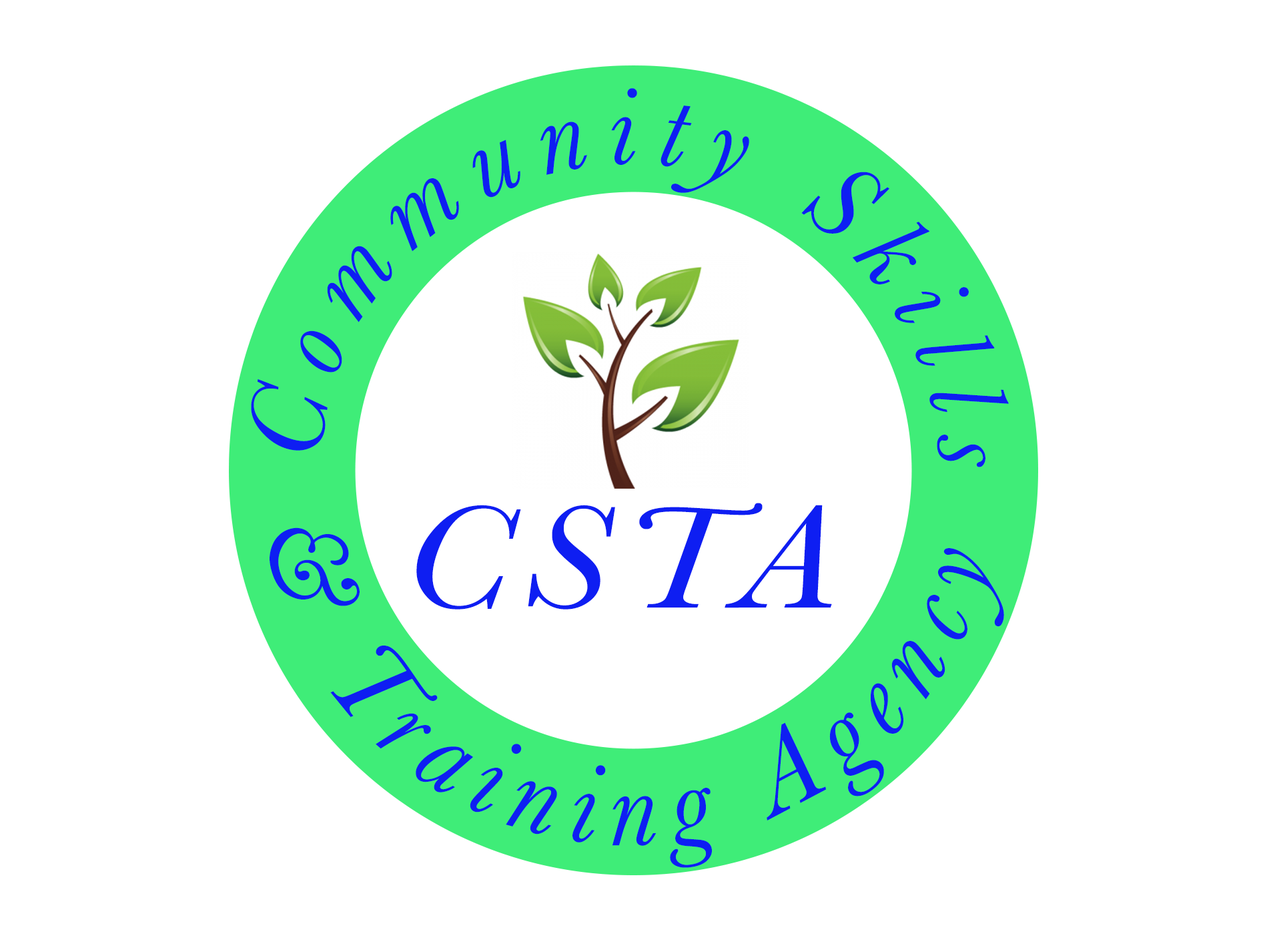
<style>
.page{position:relative;width:1261px;height:946px;background:#ffffff}
.page>*{position:absolute;margin:0}
.t1{font:111.2px "Baskerville-Italic";letter-spacing:0.18em;color:#0e1ef2}
.t2{font:151.5px "Baskerville-Italic";letter-spacing:0.08em;color:#0e1ef2;scale:1.17 1}
.t3{font:115.7px "Baskerville-Italic";letter-spacing:0.08em;color:#0e1ef2;scale:0.96 1}
</style>
<div class="page">
<p class="t1" style="left:251px;top:88px;width:758px;height:379px">Community Skills</p>
<p class="t2" style="left:416px;top:502px;width:416px;height:107px">CSTA</p>
<p class="t3" style="left:270px;top:527px;width:734px;height:340px">&amp; Training Agency</p>
</div>
